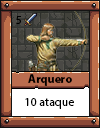
<style>
.page{position:relative;width:100px;height:128px}
.page>*{position:absolute;margin:0}
.t1{font:12px "MyriadPro-Regular";color:#000000}
.t2{font:12px "MyriadPro-Bold";color:#000000}
</style>
<div class="page">
<p class="t1" style="left:16px;top:16px;width:5px;height:8px">5</p>
<p class="t2" style="left:28px;top:74px;width:44px;height:12px">Arquero</p>
<p class="t1" style="left:25px;top:98px;width:49px;height:11px">10 ataque</p>
</div>
